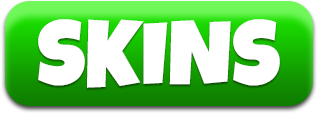
<style>
.page{position:relative;width:318px;height:114px;background:#ffffff}
.page>*{position:absolute;margin:0}
.t1{font:91px "LuckiestGuy-Regular";color:#ffffff;text-transform:uppercase}
</style>
<div class="page">
<p class="t1" style="left:38px;top:19px;width:242px;height:69px">Skins</p>
</div>
